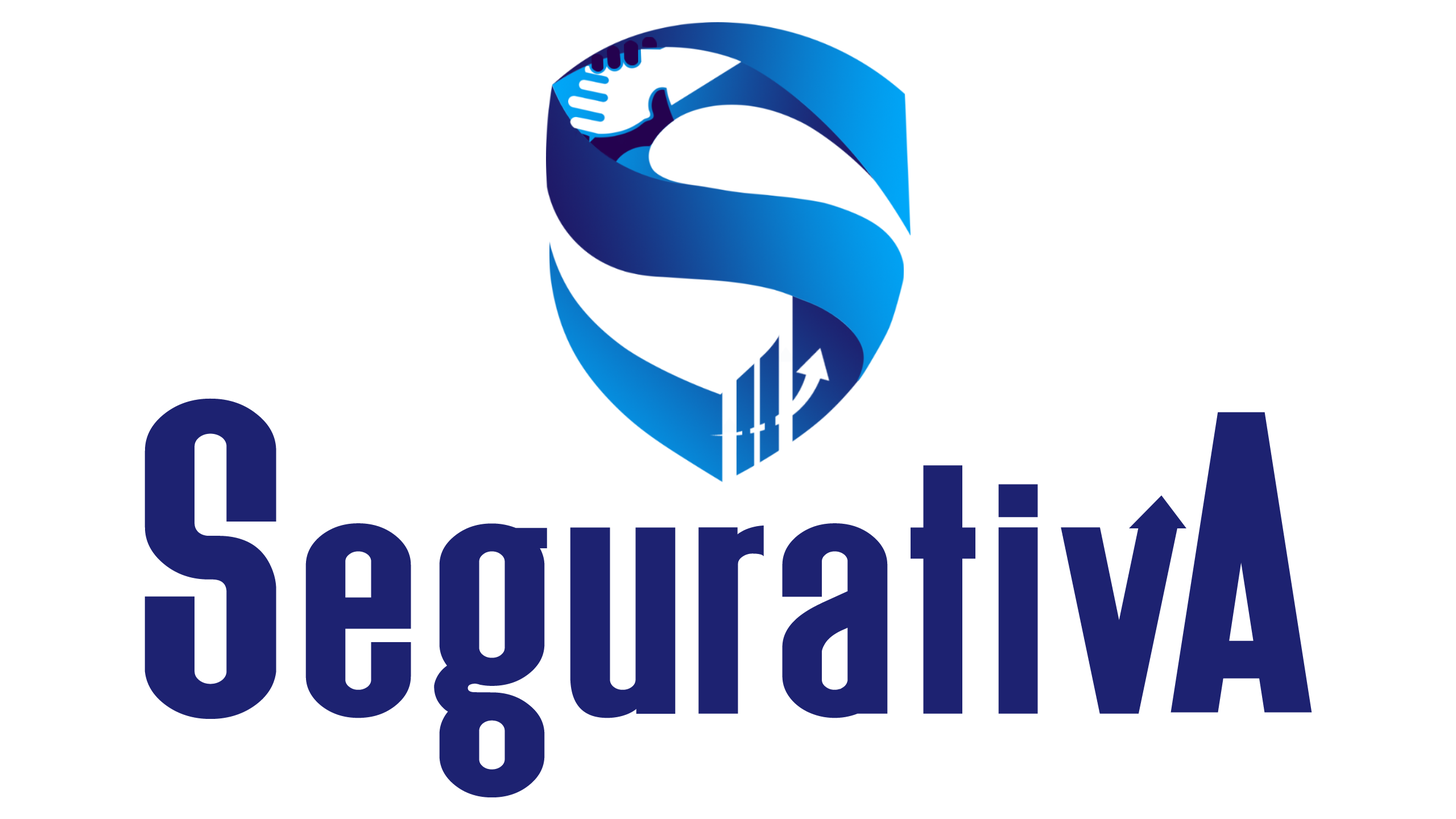
<style>
.page{position:relative;width:1456px;height:819px;background:#ffffff}
.page>*{position:absolute;margin:0}
.t1{font:378.9px "Deutschlander";letter-spacing:0.025em;color:#1d2271;scale:1.25 1}
.t2{font:473.7px "Deutschlander";letter-spacing:0.025em;color:#1d2271;scale:1.25 1}
.t3{font:458.1px "Deutschlander";letter-spacing:0.025em;color:#1d2271;scale:1.25 1}
</style>
<div class="page">
<p class="t1" style="left:144px;top:398px;width:1034px;height:399px"><span class="t2">S</span>egurativ</p>
<p class="t3" style="left:1170px;top:412px;width:142px;height:301px">A</p>
</div>
